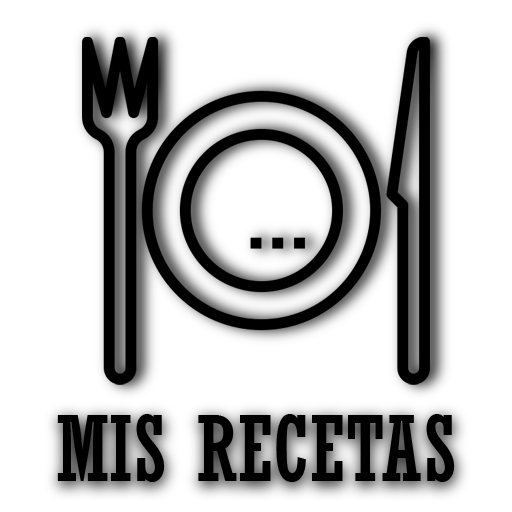
<style>
.page{position:relative;width:512px;height:512px;background:#ffffff}
.page>*{position:absolute;margin:0}
.t1{font:90px "Rockwell-Condensed";color:#000000}
</style>
<div class="page">
<p class="t1" style="left:57px;top:414px;width:398px;height:68px">MIS RECETAS</p>
</div>
